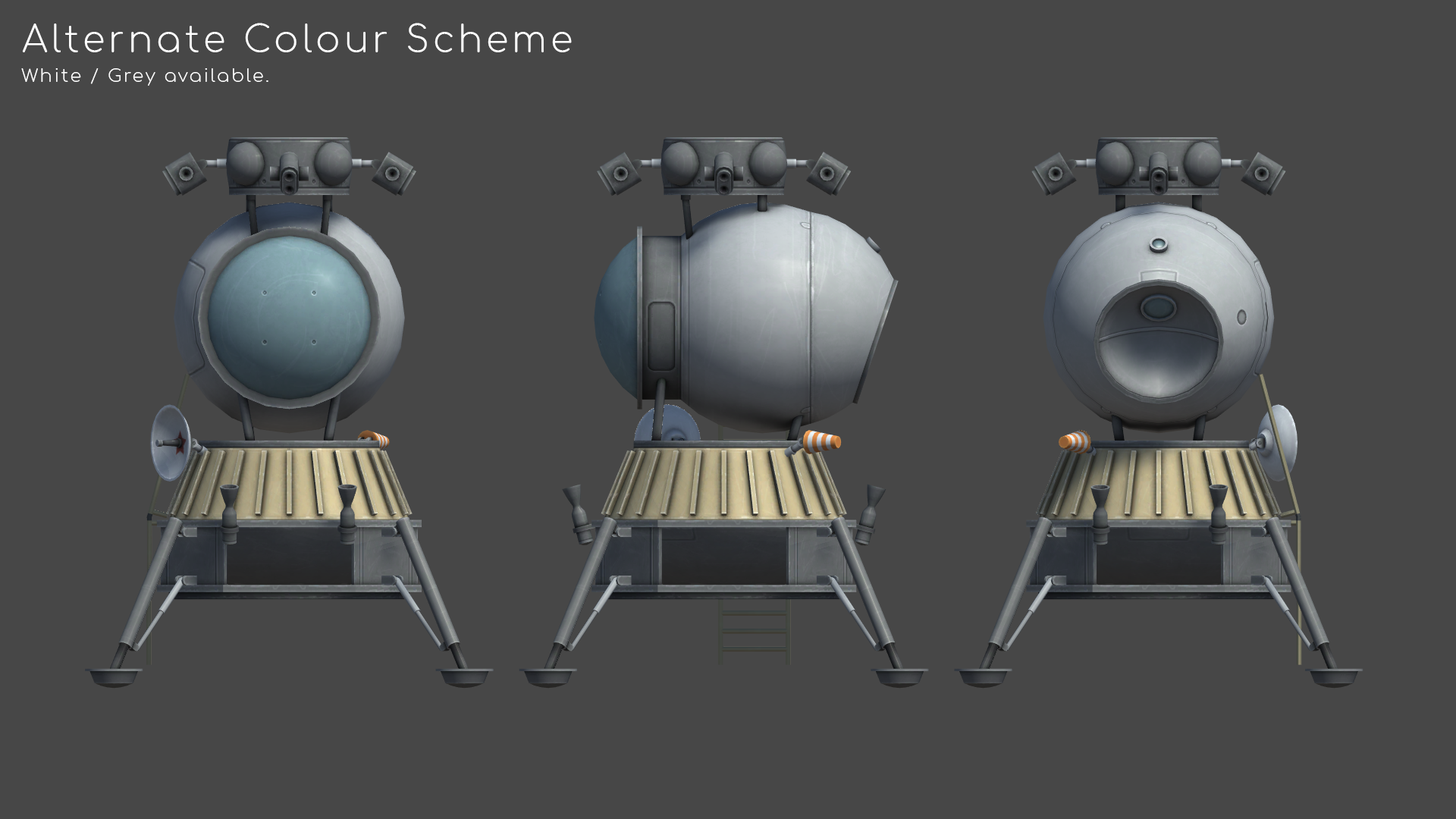
<style>
.page{position:relative;width:1456px;height:819px;background:#474747}
.page>*{position:absolute;margin:0}
.t1{font:36.4px "Comfortaa-Light";letter-spacing:0.1em;color:#ffffff}
.t2{font:18.2px "Comfortaa-Light";letter-spacing:0.1em;color:#ffffff}
</style>
<div class="page">
<p class="t1" style="left:22px;top:23px;width:550px;height:29px">Alternate Colour Scheme</p>
<p class="t2" style="left:21px;top:68px;width:247px;height:18px">White / Grey available.</p>
</div>
